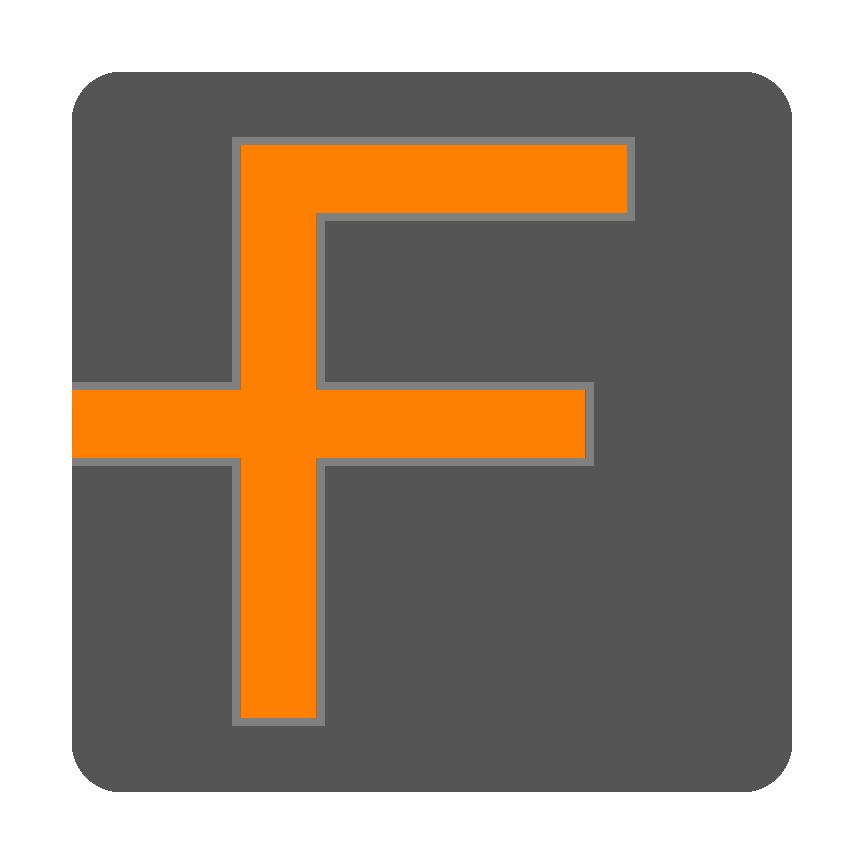
<style>
.page{position:relative;width:864px;height:864px;background:#555555}
.page>*{position:absolute;margin:0}
.t1{font:800px "ArialMT";color:#ff7f00}
</style>
<div class="page">
<p class="t1" style="left:240px;top:145px;width:387px;height:573px">F</p>
</div>
